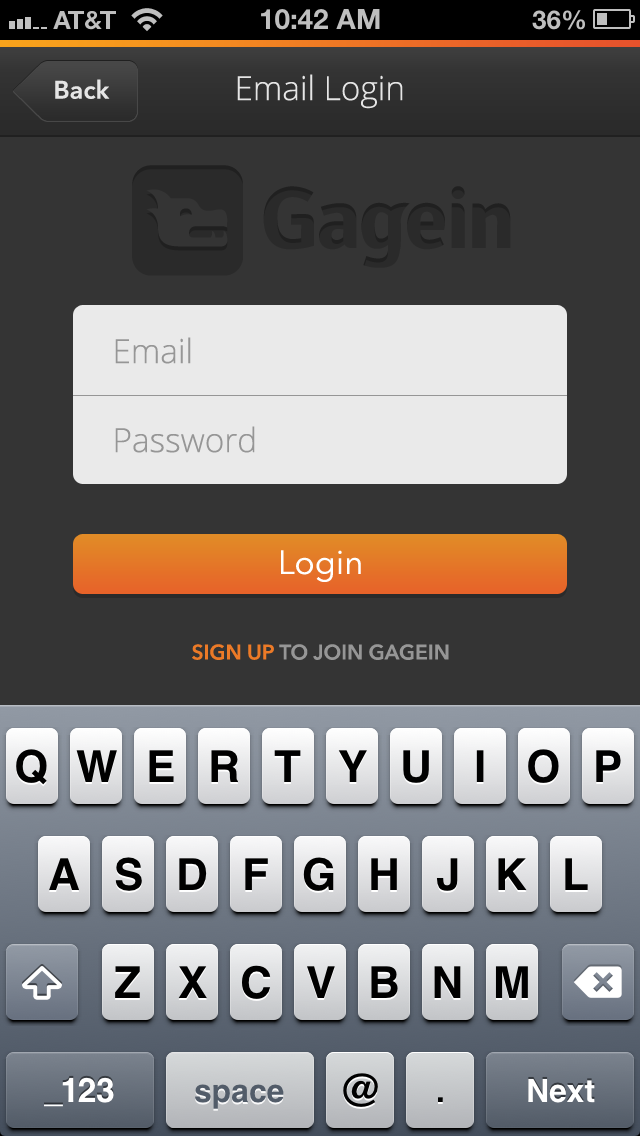
<style>
.page{position:relative;width:640px;height:1136px;background:#343434}
.page>*{position:absolute;margin:0}
.t1{font:33.3px "OpenSans-Light";color:#e5e5e5}
.t2{font:25px "AvenirNext-DemiBold";color:#e5e5e5}
.t3{font:33.3px "OpenSans-Light";color:#969696}
.t4{font:33.3px "AvenirNext-Regular";color:#ffffff}
.t5{font:20.8px "AvenirNext-DemiBold";color:#969696}
.t6{font:20.8px "AvenirNext-DemiBold";color:#ec7a27}
</style>
<div class="page">
<p class="t1" style="left:237px;top:74px;width:166px;height:35px">Email Login</p>
<p class="t2" style="left:55px;top:79px;width:55px;height:20px">Back</p>
<p class="t3" style="left:115px;top:337px;width:76px;height:27px">Email</p>
<p class="t3" style="left:115px;top:426px;width:140px;height:27px">Password</p>
<p class="t4" style="left:281px;top:550px;width:80px;height:32px">Login</p>
<p class="t5" style="left:192px;top:644px;width:257px;height:16px"><span class="t6">SIGN UP</span> TO JOIN GAGEIN</p>
</div>
